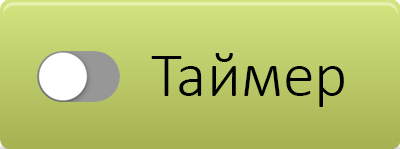
<style>
.page{position:relative;width:400px;height:149px}
.page>*{position:absolute;margin:0}
.t1{font:64px "Calibri-Light";color:#000000}
</style>
<div class="page">
<p class="t1" style="left:151px;top:53px;width:193px;height:54px">Таймер</p>
</div>
